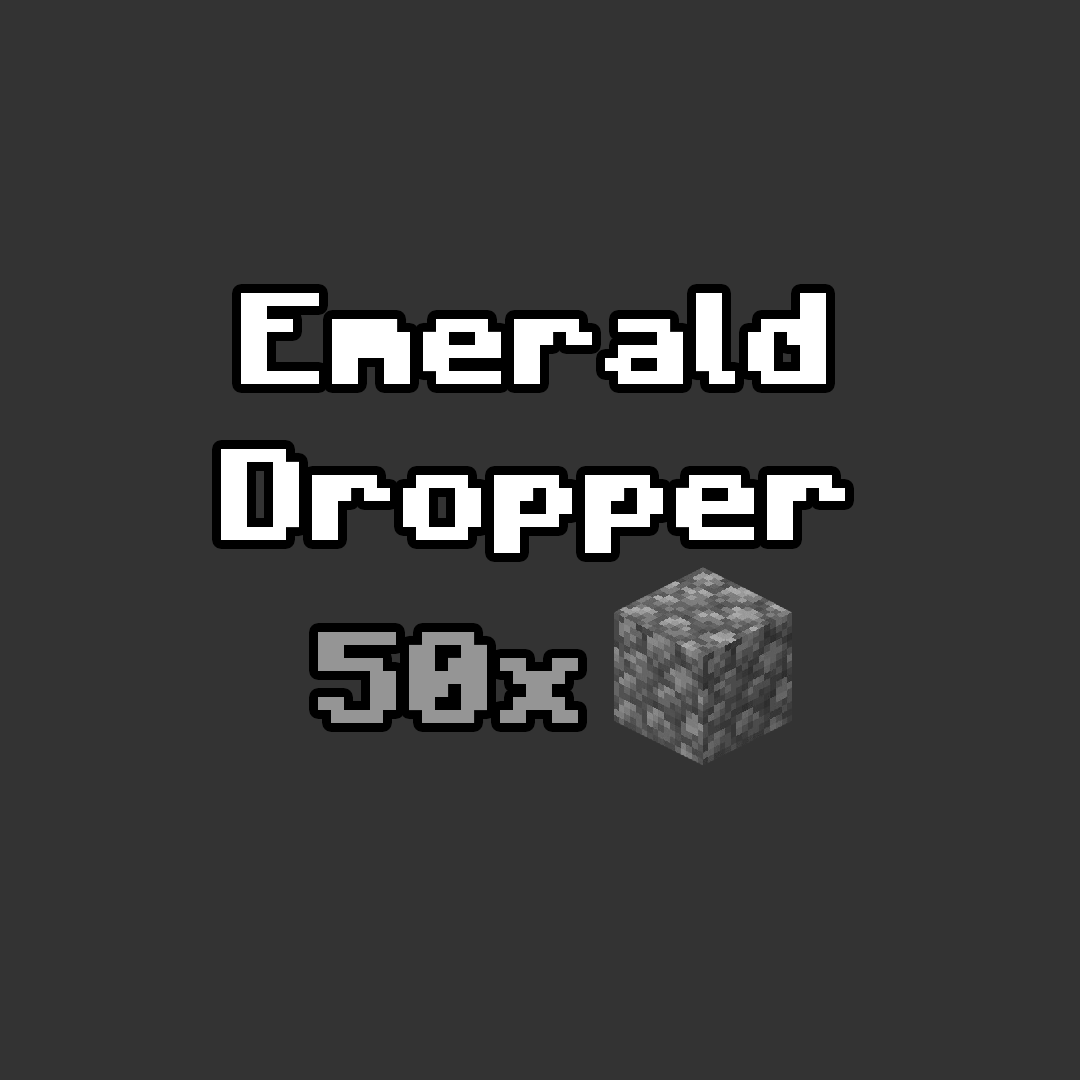
<style>
.page{position:relative;width:1080px;height:1080px;background:#333333}
.page>*{position:absolute;margin:0}
.t1{font:130px "Minecraft-Bold";color:#ffffff}
.t2{font:130px "Minecraft-Bold";color:#959595}
</style>
<div class="page">
<p class="t1" style="left:221px;top:293px;width:624px;height:260px;text-align:center">Emerald <br>Dropper</p>
<p class="t2" style="left:318px;top:632px;width:260px;height:91px">50x</p>
</div>
